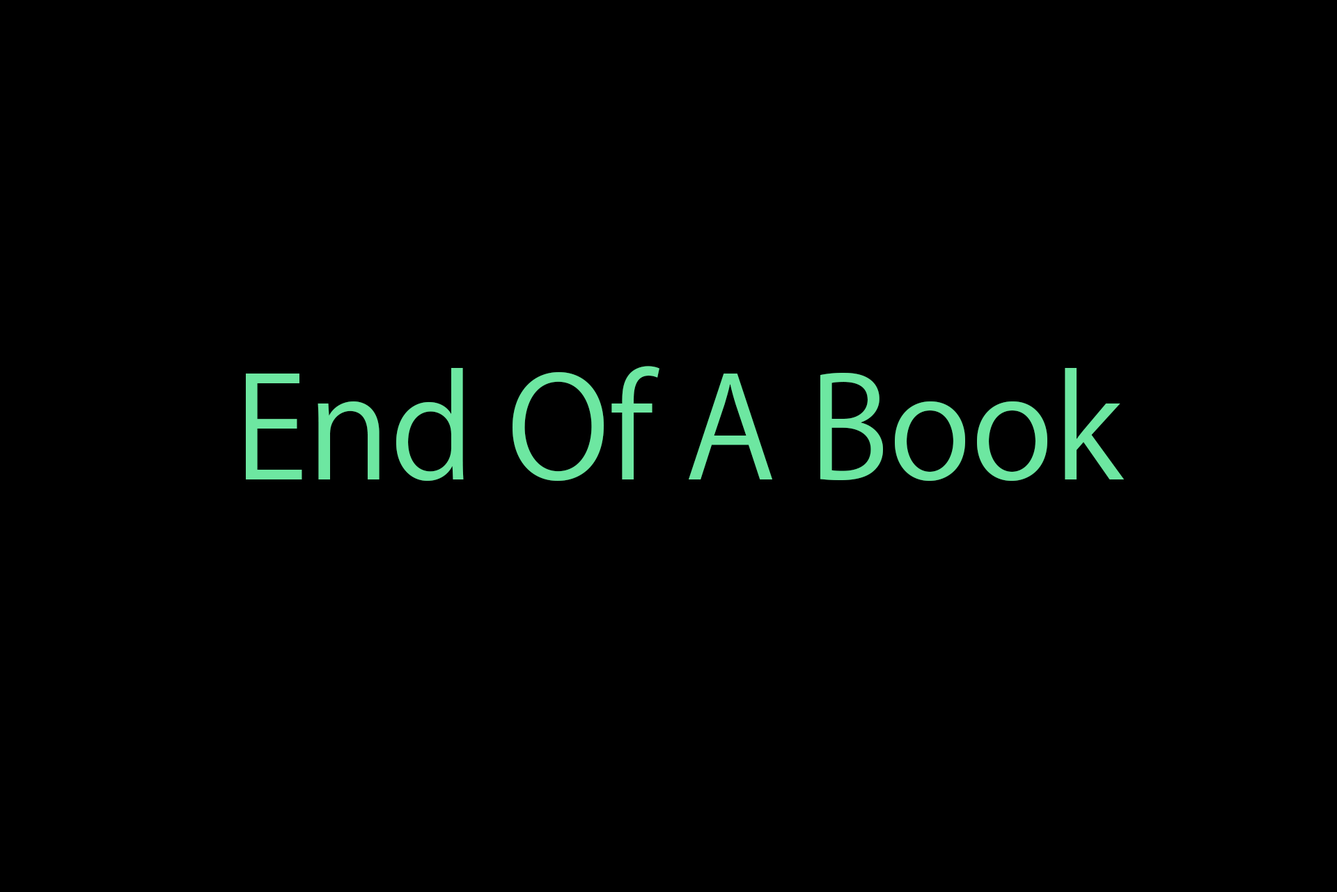
<style>
.page{position:relative;width:1337px;height:892px;background:#000000}
.page>*{position:absolute;margin:0}
.t1{font:139.3px "KozGoPr6N-Regular";color:#6de7a1}
</style>
<div class="page">
<p class="t1" style="left:246px;top:366px;width:878px;height:115px">End Of A Book</p>
</div>
